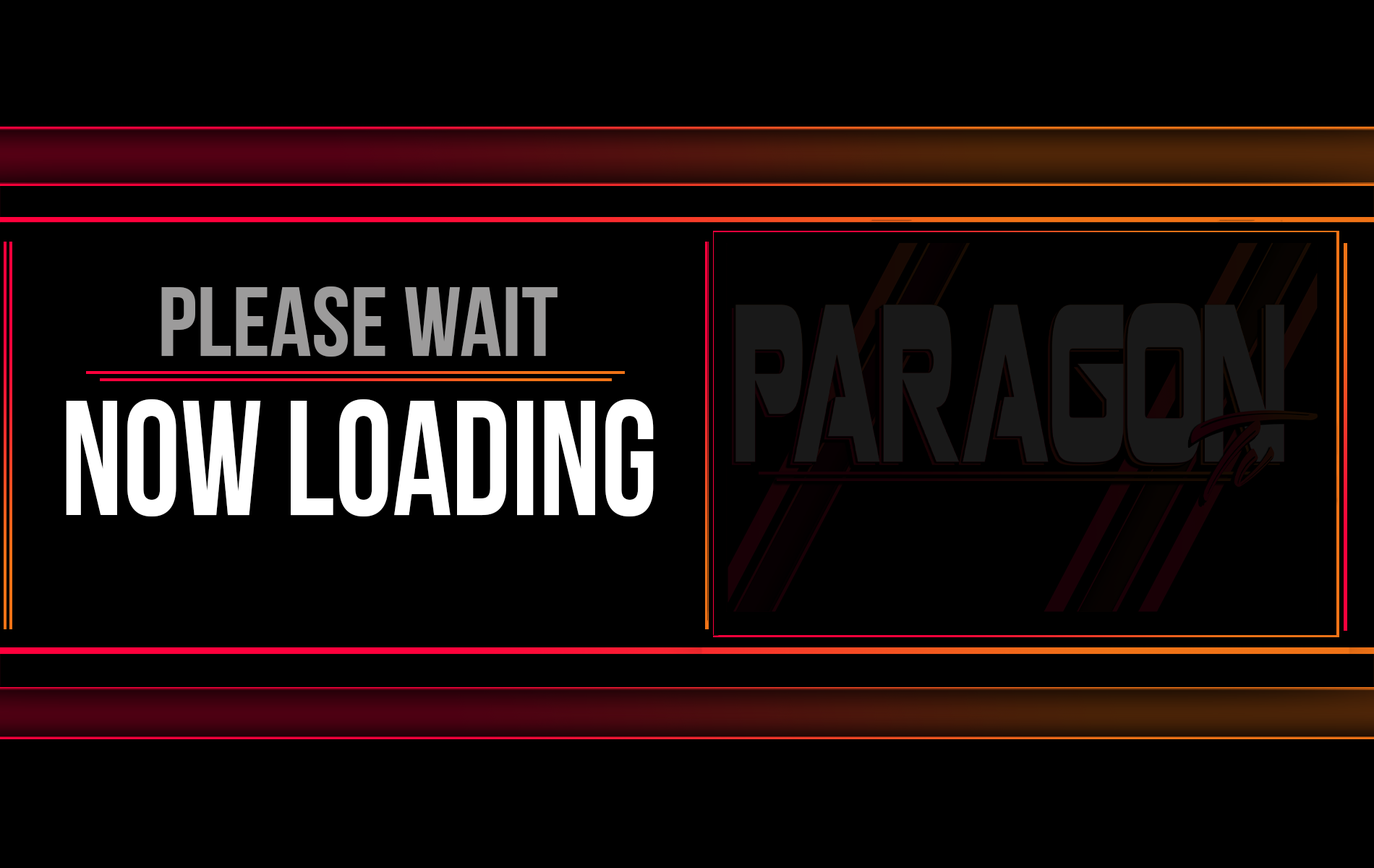
<style>
.page{position:relative;width:1374px;height:868px;background:#000000}
.page>*{position:absolute;margin:0}
.t1{font:98.3px "BebasNeue-Regular";color:#9c9b9b;scale:1.05 1}
.t2{font:163.3px "BebasNeue-Regular";color:#ffffff;scale:0.89 1}
</style>
<div class="page">
<p class="t1" style="left:161px;top:286px;width:397px;height:71px">please wait</p>
<p class="t2" style="left:66px;top:399px;width:588px;height:117px">now loading</p>
</div>
